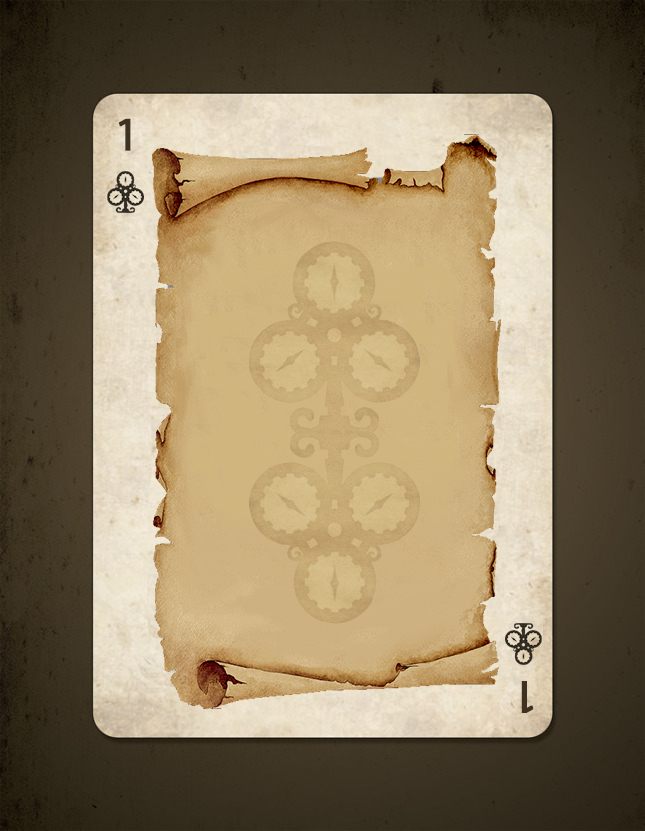
<style>
.page{position:relative;width:645px;height:831px}
.page>*{position:absolute;margin:0}
.t1{font:48px "MyriadPro-Regular";color:#3f3222;font-weight:bold}
</style>
<div class="page">
<p class="t1" style="left:119px;top:118px;width:12px;height:33px">1</p>
<p class="t1" style="left:521px;top:681px;width:13px;height:32px;rotate:180deg">1</p>
</div>
